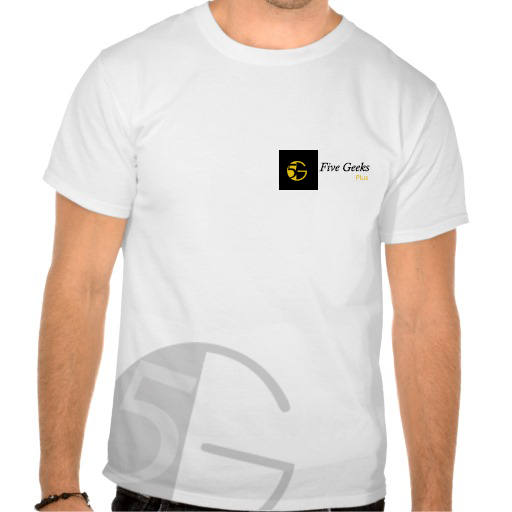
<style>
.page{position:relative;width:512px;height:512px;background:#ffffff}
.page>*{position:absolute;margin:0}
.t1{font:27.2px "Broadway"}
.t2{font:21.7px "Constantia";color:#000000}
.t3{font:12px "CalistoMT-Italic";color:#000000}
.t4{font:6.8px "CenturyGothic"}
</style>
<div class="page">
<p class="t1" style="left:287px;top:161px;width:20px;height:20px">G</p>
<p class="t2" style="left:287px;top:163px;width:10px;height:16px">5</p>
<p class="t3" style="left:319px;top:162px;width:51px;height:10px">Five Geeks</p>
<p class="t4" style="left:356px;top:175px;width:12px;height:6px">Plus</p>
</div>
